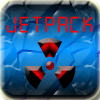
<style>
.page{position:relative;width:100px;height:100px}
.page>*{position:absolute;margin:0}
.t1{font:24px "Digital-7Mono";letter-spacing:0.075em;color:#ff0000}
</style>
<div class="page">
<p class="t1" style="left:7px;top:16px;width:86px;height:17px">JETPACK</p>
</div>
